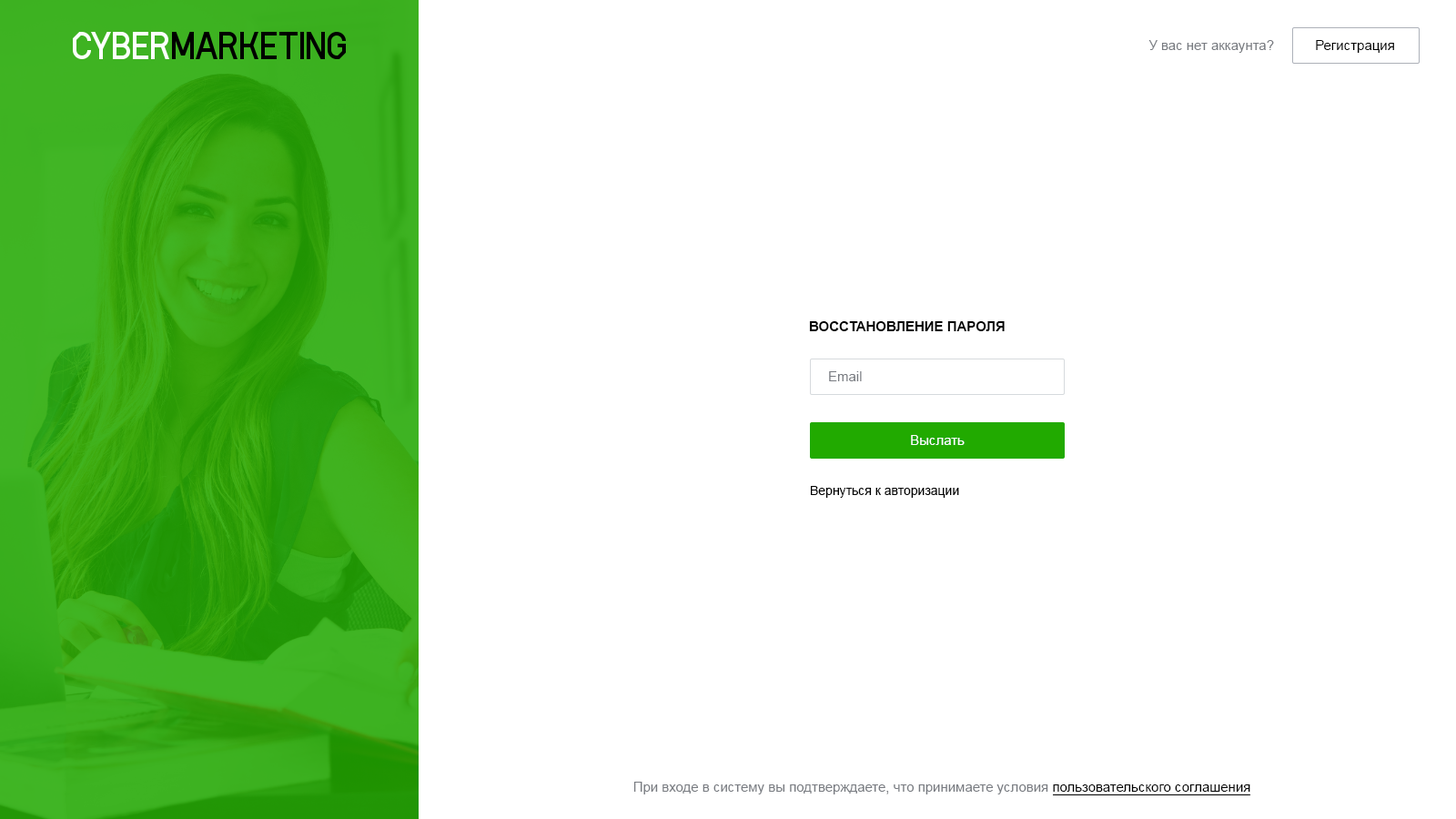
<style>
.page{position:relative;width:1456px;height:819px;background:#ffffff}
.page>*{position:absolute;margin:0}
.t1{font:13.6px "ArialMT";color:#787b81}
.t2{font:13.6px "ArialMT";color:#000000}
.t3{font:13.6px "Arial-BoldMT";color:#000000;text-transform:uppercase}
.t4{font:13.6px "ArialMT";color:#ffffff}
.t5{font:12.7px "ArialMT";color:#000000}
</style>
<div class="page">
<p class="t1" style="left:1148px;top:40px;width:126px;height:13px">У вас нет аккаунта?</p>
<p class="t2" style="left:1316px;top:40px;width:78px;height:13px">Регистрация</p>
<p class="t3" style="left:809px;top:321px;width:196px;height:10px">Восстановление пароля</p>
<p class="t1" style="left:829px;top:371px;width:33px;height:10px">Email</p>
<p class="t4" style="left:911px;top:435px;width:54px;height:10px">Выслать</p>
<p class="t5" style="left:811px;top:486px;width:148px;height:12px">Вернуться к авторизации</p>
<p class="t1" style="left:633px;top:782px;width:617px;height:12px">При входе в систему вы подтверждаете, что принимаете условия <span class="t2">пользовательского соглашения</span></p>
</div>
